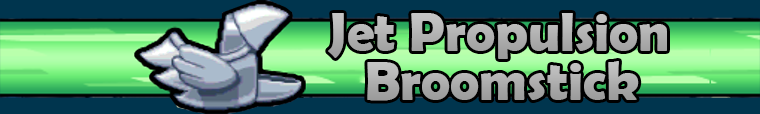
<style>
.page{position:relative;width:760px;height:114px;background:#00354e}
.page>*{position:absolute;margin:0}
.t1{font:55px "BerlinSansFBDemi-Bold";color:#b1b1b1}
.t2{font:55px "BerlinSansFBDemi-Bold";color:#ababab}
</style>
<div class="page">
<p class="t1" style="left:328px;top:13px;width:339px;height:46px">Jet Propulsion</p>
<p class="t2" style="left:367px;top:61px;width:272px;height:40px">Broomstick</p>
</div>
